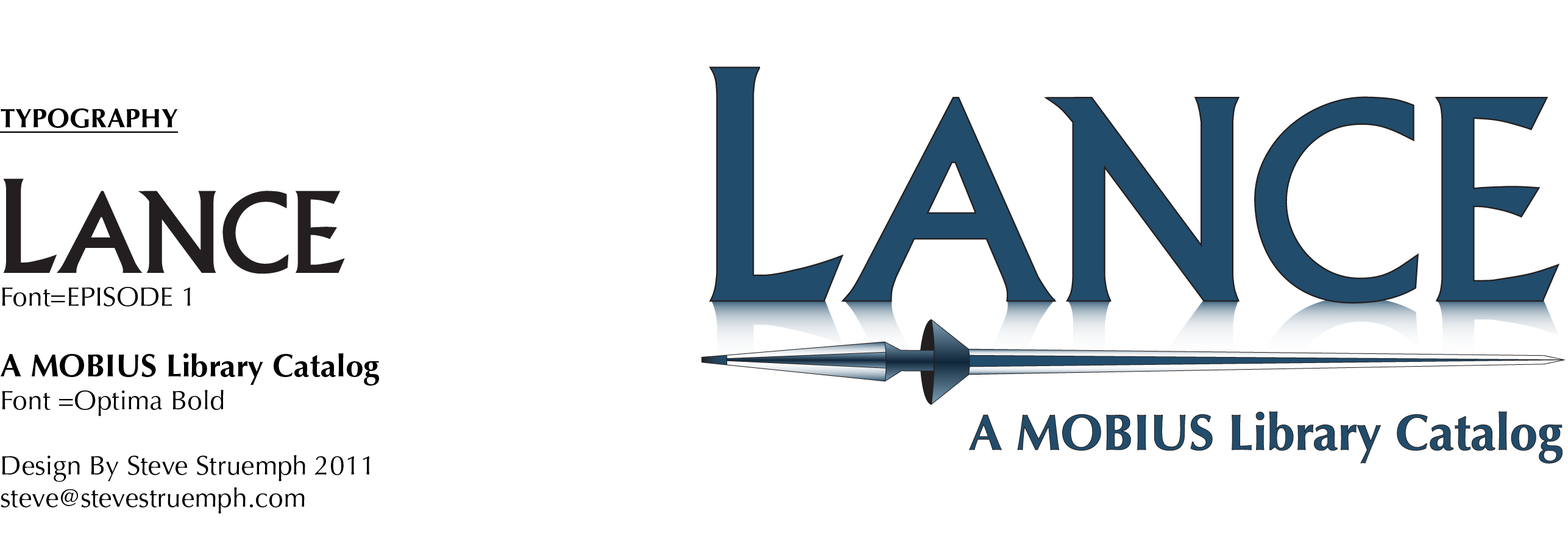
<style>
.page{position:relative;width:1568px;height:547px;background:#ffffff}
.page>*{position:absolute;margin:0}
.t1{font:27.1px "OptimaLTStd";color:#000000}
.t2{font:27.1px "OptimaLTStd-Bold";color:#000000;text-transform:uppercase;text-decoration:underline}
.t3{font:121.8px "EPISODE-I";letter-spacing:-0.05em;color:#231f20}
.t4{font:106.1px "EPISODE-I";letter-spacing:-0.1em;color:#231f20}
.t5{font:106.1px "EPISODE-I";letter-spacing:0.003em;color:#231f20}
.t6{font:106.1px "EPISODE-I";color:#231f20}
.t7{font:32px "OptimaLTStd-Bold";color:#000000}
</style>
<div class="page">
<p class="t1" style="left:0px;top:108px;width:379px;height:406px"><span class="t2">Typography<br></span><span class="t3">l</span><span class="t4">a</span><span class="t5">nc</span><span class="t6">e  <br></span>Font=EPISODE 1<br><br><span class="t7">A MOBIUS Library Catalog<br></span>Font =Optima Bold<br><br>Design By Steve Struemph 2011<br>steve@stevestruemph.com</p>
</div>
